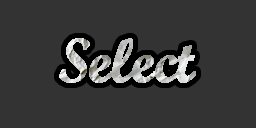
<style>
.page{position:relative;width:256px;height:128px;background:#333333}
.page>*{position:absolute;margin:0}
.t1{font:62.1px "ScriptMTBold";font-weight:bold;scale:0.93 1}
</style>
<div class="page">
<p class="t1" style="left:59px;top:38px;width:137px;height:45px">Select</p>
</div>
